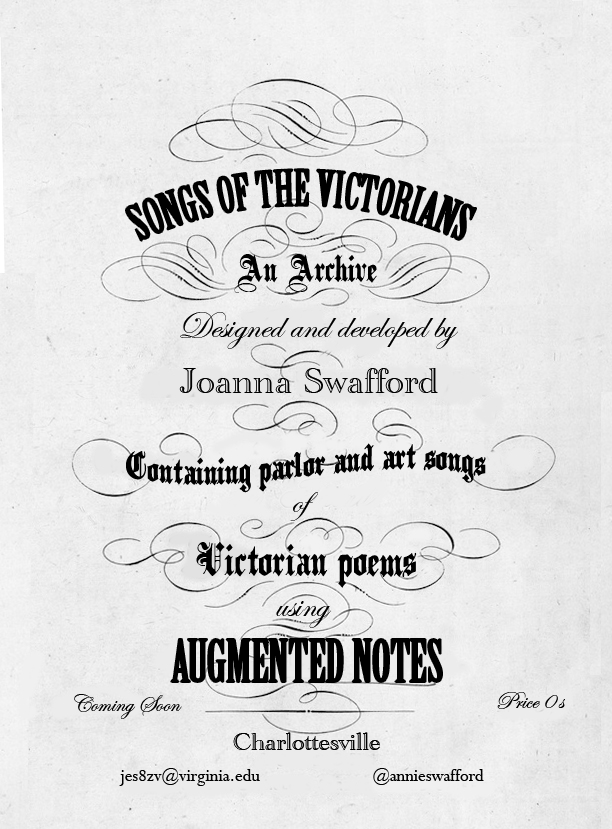
<style>
.page{position:relative;width:612px;height:829px}
.page>*{position:absolute;margin:0}
.t1{font:47.9px "BirchStd";color:#000000}
.t2{font:31.2px "PlainBlack-Normal";color:#000000}
.t3{font:37.5px "EdwardianScriptITC";color:#000000}
.t4{font:37.5px "AcademyEngravedLetPlain";color:#000000}
.t5{font:37.5px "PlainBlack-Normal";color:#000000}
.t6{font:57.3px "BirchStd";color:#000000}
.t7{font:25px "EdwardianScriptITC";color:#000000}
.t8{font:25px "AcademyEngravedLetPlain";color:#000000}
.t9{font:18.8px "Perpetua";color:#000000}
</style>
<div class="page">
<p class="t1" style="left:126px;top:169px;width:350px;height:72px">SONGS OF THE VICTORIANS</p>
<p class="t2" style="left:234px;top:254px;width:143px;height:39px">An Archive</p>
<p class="t3" style="left:180px;top:312px;width:278px;height:37px">Designed and developed by</p>
<p class="t4" style="left:179px;top:368px;width:259px;height:25px">Joanna Swafford</p>
<p class="t2" style="left:126px;top:443px;width:360px;height:50px">Containing parlor and art songs</p>
<p class="t3" style="left:290px;top:492px;width:28px;height:29px">of</p>
<p class="t5" style="left:196px;top:542px;width:221px;height:46px">Victorian poems</p>
<p class="t3" style="left:276px;top:601px;width:55px;height:27px">using</p>
<p class="t6" style="left:171px;top:639px;width:271px;height:43px">AUGMENTED NOTES</p>
<p class="t7" style="left:74px;top:694px;width:108px;height:25px">Coming Soon</p>
<p class="t7" style="left:497px;top:692px;width:68px;height:17px">Price 0 s</p>
<p class="t8" style="left:233px;top:732px;width:147px;height:18px">Charlottesville</p>
<p class="t9" style="left:119px;top:768px;width:365px;height:18px">jes8zv@virginia.edu     @annieswafford</p>
</div>
